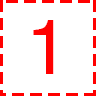
<style>
.page{position:relative;width:96px;height:96px;background:#ffffff}
.page>*{position:absolute;margin:0}
.t1{font:76.9px "Helvetica";letter-spacing:0.05em;color:#ff0000}
</style>
<div class="page">
<p class="t1" style="left:33px;top:20px;width:21px;height:54px">1</p>
</div>
